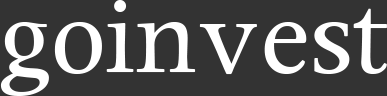
<style>
.page{position:relative;width:387px;height:96px;background:#333333}
.page>*{position:absolute;margin:0}
.t1{font:118.7px "JCkg";color:#ffffff}
</style>
<div class="page">
<p class="t1" style="left:0px;top:0px;width:387px;height:96px">goinvest</p>
</div>
